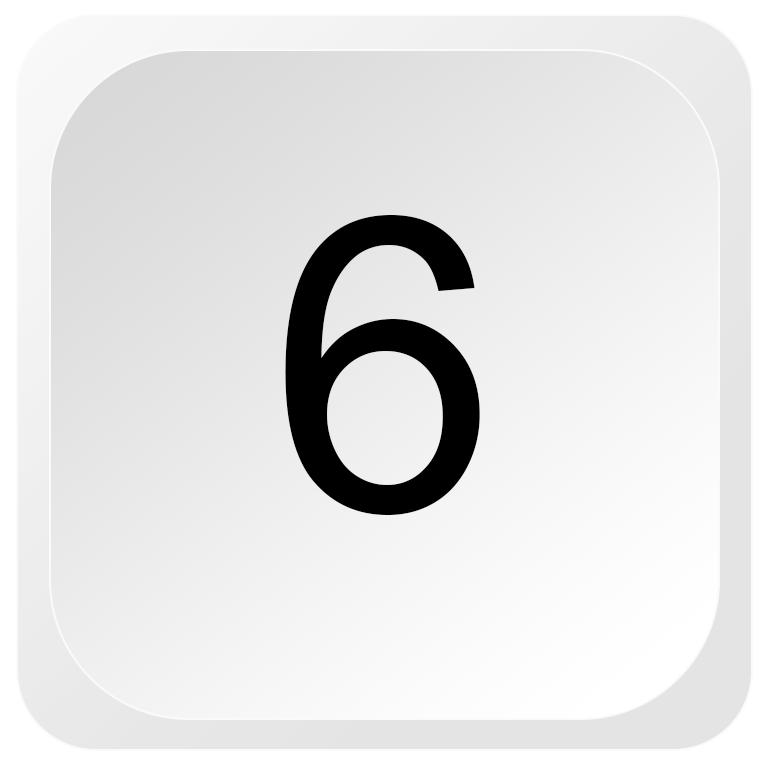
<style>
.page{position:relative;width:768px;height:768px}
.page>*{position:absolute;margin:0}
.t1{font:411px "ArialMT";color:#000000}
</style>
<div class="page">
<p class="t1" style="left:285px;top:215px;width:195px;height:300px">6</p>
</div>
